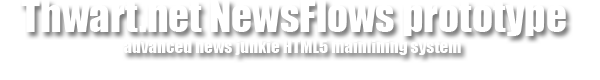
<style>
.page{position:relative;width:600px;height:80px;background:#ffffff}
.page>*{position:absolute;margin:0}
.t1{font:17.1px "Impact";color:#ffffff}
.t2{font:41.1px "Impact";color:#ffffff}
</style>
<div class="page">
<p class="t1" style="left:21px;top:0px;width:545px;height:55px;text-align:center;opacity:0.7"><span class="t2">Thwart.net NewsFlows prototype<br></span>advanced news junkie HTML5 mainlining system</p>
</div>
